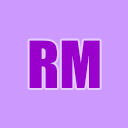
<style>
.page{position:relative;width:128px;height:128px;background:#cc99ff}
.page>*{position:absolute;margin:0}
.t1{font:60px "Impact";color:#9900cc}
</style>
<div class="page">
<p class="t1" style="left:29px;top:40px;width:71px;height:48px">RM</p>
</div>
